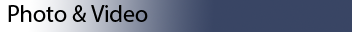
<style>
.page{position:relative;width:352px;height:32px;background:#394564}
.page>*{position:absolute;margin:0}
.t1{font:24px "MyriadPro-Regular";color:#000000}
</style>
<div class="page">
<p class="t1" style="left:8px;top:5px;width:140px;height:17px">Photo &amp; Video</p>
</div>
